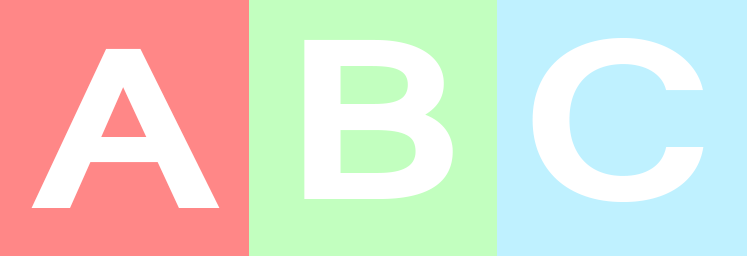
<style>
.page{position:relative;width:747px;height:256px;background:#bff1ff}
.page>*{position:absolute;margin:0}
.t1{font:246px "Vrinda-Bold";letter-spacing:-0.08em;color:#ffffff;scale:1.22 1}
</style>
<div class="page">
<p class="t1" style="left:304px;top:39px;width:149px;height:160px">B</p>
<p class="t1" style="left:532px;top:37px;width:172px;height:165px">C</p>
<p class="t1" style="left:31px;top:48px;width:189px;height:160px">A</p>
</div>
